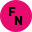
<style>
.page{position:relative;width:32px;height:32px;background:#e60b6e}
.page>*{position:absolute;margin:0}
.t1{font:12px/9px "Flama-Semibold";color:#000000}
</style>
<div class="page">
<p class="t1" style="left:9px;top:7px;width:14px;height:18px">F<br>  N</p>
</div>
